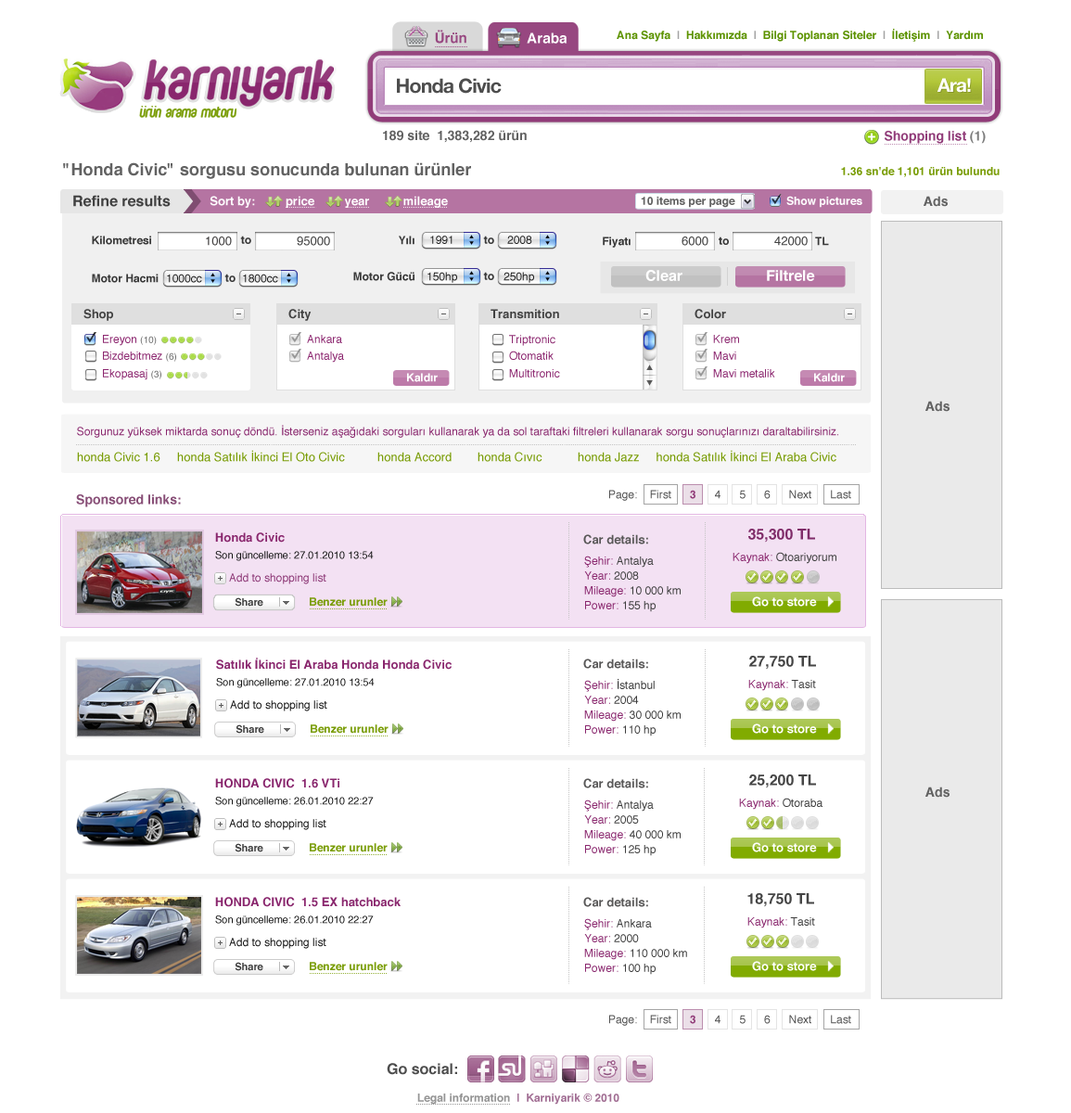
<style>
.page{position:relative;width:1071px;height:1113px;background:#ffffff}
.page>*{position:absolute;margin:0}
.t1{font:14.1px "Helvetica-Bold";color:#974780}
.t2{font:14.1px "Helvetica-Bold";color:#974780;text-transform:uppercase}
.t3{font:11.1px "Helvetica-Bold";color:#5d9300}
.t4{font:11.1px "Helvetica-Bold";color:#cccccc}
.t5{font:11.1px "Helvetica-Bold";color:#a3a3a3}
.t6{font:11.1px "Helvetica-Bold";color:#a4a4a4}
.t7{font:14.1px "Helvetica-Bold";color:#ffffff}
.t8{font:19.6px "HelveticaNeue-Bold";letter-spacing:-0.035em;color:#4d4d4d}
.t9{font:18.8px "HelveticaNeue-Bold";letter-spacing:-0.035em;color:#ffffff}
.t10{font:13px "Helvetica-Bold";color:#626262}
.t11{font:13px "Helvetica-Bold";color:#913c79}
.t12{font:13px "Helvetica-Bold";color:#7d7d7d}
.t13{font:16.7px "Helvetica-Bold";color:#626262}
.t14{font:11.1px "Helvetica-Bold";color:#7a9d07}
.t15{font:14.8px "Helvetica-Bold";color:#414141}
.t16{font:12.1px "Helvetica-Bold";color:#ffffff}
.t17{font:11.1px "Helvetica-Bold";color:#626262}
.t18{font:11.1px "Helvetica-Bold";color:#ffffff}
.t19{font:11.1px "Helvetica-Bold";color:#393939}
.t20{font:12.1px "Helvetica";color:#444242}
.t21{font:12.1px "Helvetica";color:#434343}
.t22{font:11.1px "Helvetica";color:#212121}
.t23{font:14.8px "Helvetica-Bold";color:#ffffff}
.t24{font:12.1px "Helvetica-Bold";color:#414141}
.t25{font:11.1px "Helvetica";color:#8b256e}
.t26{font:9.3px "Helvetica";color:#717171}
.t27{font:11.1px "Helvetica";color:#89266d}
.t28{font:12.1px "Helvetica";color:#7a9d07}
.t29{font:13px "Helvetica-Bold";color:#884f77}
.t30{font:11.1px "Helvetica";color:#505050}
.t31{font:11.1px "Helvetica-Bold";color:#94407c}
.t32{font:12.1px "Helvetica-Bold";color:#89266d}
.t33{font:14.8px "Helvetica-Bold";color:#7f2b68}
.t34{font:12.1px "Helvetica-Bold";color:#585757}
.t35{font:10.2px "Helvetica";color:#141414}
.t36{font:11.1px "Helvetica";color:#3d3d3d}
.t37{font:11.1px "Helvetica";color:#8b3574}
.t38{font:10.2px "Helvetica-Bold";color:#3d3d3d}
.t39{font:14.8px "Helvetica-Bold";color:#454545}
.t40{font:11.1px "Helvetica";color:#141414}
.t41{font:14.8px "Helvetica-Bold";color:#4d4d4d}
.t42{font:11.1px "Helvetica-Bold";color:#a26f94}
.t43{font:11.1px "Helvetica-Bold";color:#959595}
</style>
<div class="page">
<p class="t1" style="left:435px;top:30px;width:32px;height:14px"><span class="t2">ü</span>rün</p>
<p class="t3" style="left:617px;top:29px;width:366px;height:13px"><span class="t4"><br></span>Ana Sayfa  <span class="t5">|</span>  Hakkımızda  <span class="t6">|</span>  Bilgi Toplanan Siteler  <span class="t6">|</span>  İletişim <span class="t6"> | </span> Yardım</p>
<p class="t7" style="left:527px;top:32px;width:41px;height:12px">Araba</p>
<p class="t8" style="left:397px;top:78px;width:105px;height:16px">Honda Civic</p>
<p class="t9" style="left:938px;top:78px;width:33px;height:15px">Ara!</p>
<p class="t10" style="left:383px;top:130px;width:144px;height:13px">189 site  1,383,282 ürün</p>
<p class="t11" style="left:885px;top:131px;width:101px;height:13px">Shopping list <span class="t12">(1)</span></p>
<p class="t13" style="left:63px;top:162px;width:408px;height:17px">"Honda Civic" sorgusu sonucunda bulunan ürünler</p>
<p class="t14" style="left:841px;top:167px;width:159px;height:10px">1.36 sn'de 1,101 ürün bulundu</p>
<p class="t15" style="left:73px;top:195px;width:98px;height:12px">Refine results</p>
<p class="t16" style="left:210px;top:196px;width:238px;height:12px">Sort by:         price         year          mileage</p>
<p class="t17" style="left:641px;top:197px;width:95px;height:11px">10 items per page</p>
<p class="t18" style="left:787px;top:196px;width:76px;height:12px">Show pictures</p>
<p class="t10" style="left:924px;top:196px;width:24px;height:11px">Ads</p>
<p class="t19" style="left:92px;top:236px;width:59px;height:9px">Kilometresi</p>
<p class="t20" style="left:206px;top:237px;width:26px;height:9px">1000</p>
<p class="t19" style="left:240px;top:236px;width:11px;height:8px">to</p>
<p class="t21" style="left:297px;top:237px;width:33px;height:9px">95000</p>
<p class="t19" style="left:399px;top:236px;width:16px;height:9px">Yılı</p>
<p class="t22" style="left:430px;top:236px;width:23px;height:8px">1991</p>
<p class="t19" style="left:483px;top:236px;width:11px;height:8px">to</p>
<p class="t22" style="left:507px;top:236px;width:25px;height:8px">2008</p>
<p class="t19" style="left:603px;top:237px;width:28px;height:11px">Fiyatı</p>
<p class="t21" style="left:682px;top:237px;width:27px;height:9px">6000</p>
<p class="t19" style="left:719px;top:237px;width:10px;height:8px">to</p>
<p class="t21" style="left:775px;top:237px;width:33px;height:9px">42000</p>
<p class="t19" style="left:815px;top:237px;width:14px;height:9px">TL</p>
<p class="t23" style="left:646px;top:270px;width:37px;height:11px">Clear</p>
<p class="t23" style="left:767px;top:270px;width:48px;height:11px">Filtrele</p>
<p class="t19" style="left:92px;top:274px;width:67px;height:9px">Motor Hacmi</p>
<p class="t22" style="left:167px;top:274px;width:35px;height:9px">1000cc</p>
<p class="t19" style="left:224px;top:274px;width:12px;height:8px">to</p>
<p class="t22" style="left:243px;top:274px;width:35px;height:9px">1800cc</p>
<p class="t19" style="left:353px;top:272px;width:62px;height:9px">Motor Gücü</p>
<p class="t22" style="left:428px;top:272px;width:29px;height:11px">150hp</p>
<p class="t19" style="left:483px;top:272px;width:11px;height:8px">to</p>
<p class="t22" style="left:504px;top:272px;width:30px;height:11px">250hp</p>
<p class="t24" style="left:83px;top:309px;width:30px;height:12px">Shop</p>
<p class="t24" style="left:288px;top:309px;width:24px;height:12px">City</p>
<p class="t24" style="left:491px;top:309px;width:68px;height:10px">Transmition</p>
<p class="t24" style="left:695px;top:309px;width:31px;height:10px">Color</p>
<p class="t25" style="left:103px;top:335px;width:54px;height:11px">Ereyon <span class="t26">(10)</span></p>
<p class="t25" style="left:307px;top:335px;width:35px;height:8px">Ankara</p>
<p class="t25" style="left:509px;top:335px;width:47px;height:11px">Triptronic</p>
<p class="t25" style="left:713px;top:335px;width:26px;height:8px">Krem</p>
<p class="t25" style="left:103px;top:352px;width:73px;height:10px">Bizdebitmez <span class="t26">(6)</span></p>
<p class="t25" style="left:307px;top:352px;width:37px;height:11px">Antalya</p>
<p class="t25" style="left:509px;top:351px;width:45px;height:9px">Otomatik</p>
<p class="t25" style="left:713px;top:352px;width:23px;height:8px">Mavi</p>
<p class="t25" style="left:103px;top:369px;width:58px;height:11px">Ekopasaj <span class="t26">(3)</span></p>
<p class="t25" style="left:509px;top:369px;width:51px;height:9px">Multitronic</p>
<p class="t25" style="left:713px;top:369px;width:62px;height:9px">Mavi metalik</p>
<p class="t10" style="left:926px;top:401px;width:24px;height:11px">Ads</p>
<p class="t27" style="left:77px;top:425px;width:762px;height:13px">Sorgunuz yüksek miktarda sonuç döndü. İsterseniz aşağıdaki sorguları kullanarak ya da sol taraftaki filtreleri kullanarak sorgu sonuçlarınızı daraltabilirsiniz.</p>
<p class="t28" style="left:77px;top:450px;width:760px;height:12px">honda Civic 1.6   honda Satılık İkinci El Oto Civic   honda Accord   honda Cıvıc   honda Jazz     honda Satılık İkinci El Araba Civic</p>
<p class="t29" style="left:76px;top:494px;width:105px;height:13px">Sponsored links:</p>
<p class="t30" style="left:609px;top:490px;width:242px;height:11px">Page:    First      <span class="t31">3</span>      4      5      6      Next      Last</p>
<p class="t32" style="left:215px;top:532px;width:70px;height:11px">Honda Civic</p>
<p class="t33" style="left:749px;top:529px;width:66px;height:14px">35,300 TL</p>
<p class="t34" style="left:583px;top:534px;width:65px;height:10px">Car details:</p>
<p class="t35" style="left:215px;top:551px;width:159px;height:10px">Son güncelleme: 27.01.2010 13:54</p>
<p class="t36" style="left:584px;top:556px;width:70px;height:12px"><span class="t27">Şehir: </span>Antalya</p>
<p class="t36" style="left:733px;top:552px;width:104px;height:12px"><span class="t27">Kaynak: </span>Otoariyorum</p>
<p class="t37" style="left:229px;top:573px;width:97px;height:11px">Add to shopping list</p>
<p class="t27" style="left:584px;top:571px;width:55px;height:9px">Year: <span class="t36">2008</span></p>
<p class="t36" style="left:584px;top:586px;width:97px;height:11px"><span class="t27">Mileage: </span>10 000 km</p>
<p class="t38" style="left:235px;top:597px;width:28px;height:10px">Share</p>
<p class="t14" style="left:310px;top:597px;width:78px;height:10px">Benzer urunler</p>
<p class="t27" style="left:585px;top:601px;width:71px;height:11px">Power: <span class="t36">155 hp</span></p>
<p class="t16" style="left:752px;top:596px;width:65px;height:11px">Go to store</p>
<p class="t32" style="left:216px;top:658px;width:236px;height:12px">Satılık İkinci El Araba Honda Honda Civic</p>
<p class="t34" style="left:583px;top:659px;width:65px;height:10px">Car details:</p>
<p class="t39" style="left:749px;top:656px;width:67px;height:14px">27,750 TL</p>
<p class="t35" style="left:216px;top:678px;width:159px;height:10px">Son güncelleme: 27.01.2010 13:54</p>
<p class="t36" style="left:584px;top:679px;width:71px;height:13px"><span class="t27">Şehir: </span>İstanbul</p>
<p class="t27" style="left:749px;top:680px;width:67px;height:11px">Kaynak: <span class="t36">Tasit</span></p>
<p class="t40" style="left:230px;top:700px;width:97px;height:11px">Add to shopping list</p>
<p class="t27" style="left:584px;top:696px;width:55px;height:8px">Year: <span class="t36">2004</span></p>
<p class="t36" style="left:584px;top:710px;width:97px;height:12px"><span class="t27">Mileage: </span>30 000 km</p>
<p class="t38" style="left:236px;top:724px;width:28px;height:10px">Share</p>
<p class="t14" style="left:311px;top:724px;width:78px;height:10px">Benzer urunler</p>
<p class="t27" style="left:585px;top:725px;width:71px;height:11px">Power: <span class="t36">110 hp</span></p>
<p class="t16" style="left:752px;top:723px;width:65px;height:11px">Go to store</p>
<p class="t32" style="left:215px;top:778px;width:124px;height:10px">HONDA CIVIC  1.6 VTi</p>
<p class="t34" style="left:583px;top:778px;width:65px;height:10px">Car details:</p>
<p class="t39" style="left:749px;top:775px;width:67px;height:13px">25,200 TL</p>
<p class="t35" style="left:215px;top:797px;width:159px;height:10px">Son güncelleme: 26.01.2010 22:27</p>
<p class="t27" style="left:739px;top:798px;width:84px;height:12px">Kaynak: <span class="t36">Otoraba</span></p>
<p class="t10" style="left:926px;top:787px;width:24px;height:11px">Ads</p>
<p class="t36" style="left:584px;top:800px;width:70px;height:12px"><span class="t27">Şehir: </span>Antalya</p>
<p class="t40" style="left:229px;top:819px;width:97px;height:11px">Add to shopping list</p>
<p class="t27" style="left:584px;top:815px;width:55px;height:9px">Year: <span class="t36">2005</span></p>
<p class="t36" style="left:584px;top:830px;width:97px;height:11px"><span class="t27">Mileage: </span>40 000 km</p>
<p class="t38" style="left:235px;top:843px;width:28px;height:9px">Share</p>
<p class="t14" style="left:310px;top:843px;width:78px;height:9px">Benzer urunler</p>
<p class="t27" style="left:585px;top:845px;width:71px;height:11px">Power: <span class="t36">125 hp</span></p>
<p class="t16" style="left:752px;top:842px;width:65px;height:10px">Go to store</p>
<p class="t39" style="left:748px;top:893px;width:66px;height:14px">18,750 TL</p>
<p class="t32" style="left:215px;top:897px;width:186px;height:10px">HONDA CIVIC  1.5 EX hatchback</p>
<p class="t34" style="left:583px;top:897px;width:65px;height:10px">Car details:</p>
<p class="t35" style="left:215px;top:915px;width:159px;height:11px">Son güncelleme: 26.01.2010 22:27</p>
<p class="t27" style="left:748px;top:917px;width:67px;height:11px">Kaynak: <span class="t36">Tasit</span></p>
<p class="t27" style="left:584px;top:918px;width:68px;height:12px">Şehir: <span class="t36">Ankara</span></p>
<p class="t40" style="left:229px;top:938px;width:97px;height:11px">Add to shopping list</p>
<p class="t27" style="left:584px;top:934px;width:55px;height:8px">Year: <span class="t36">2000</span></p>
<p class="t36" style="left:584px;top:949px;width:103px;height:11px"><span class="t27">Mileage: </span>110 000 km</p>
<p class="t38" style="left:235px;top:962px;width:28px;height:9px">Share</p>
<p class="t14" style="left:310px;top:962px;width:78px;height:9px">Benzer urunler</p>
<p class="t27" style="left:585px;top:964px;width:71px;height:11px">Power: <span class="t36">100 hp</span></p>
<p class="t16" style="left:752px;top:961px;width:65px;height:10px">Go to store</p>
<p class="t30" style="left:609px;top:1015px;width:242px;height:11px">Page:    First      <span class="t31">3</span>      4      5      6      Next      Last</p>
<p class="t41" style="left:387px;top:1063px;width:70px;height:12px">Go social:</p>
<p class="t42" style="left:417px;top:1094px;width:203px;height:11px"><span class="t43">Legal information</span>  |  Karniyarik © 2010</p>
</div>
